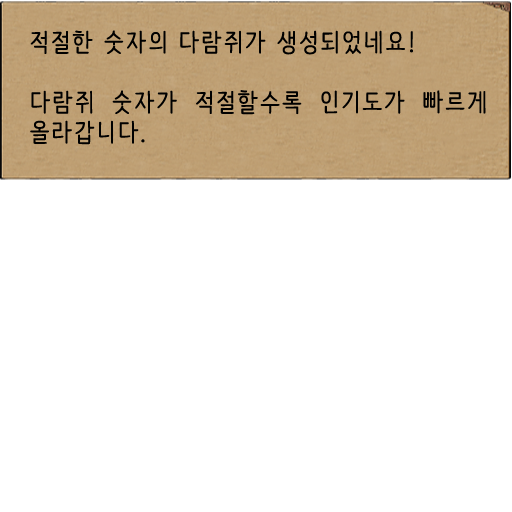
<style>
.page{position:relative;width:512px;height:512px;background:#ffffff}
.page>*{position:absolute;margin:0}
.t1{font:25px "NanumBarunpen";letter-spacing:0.075em;color:#000000;font-weight:bold}
</style>
<div class="page">
<p class="t1" style="left:30px;top:30px;width:456px;height:115px;text-align:justify">적절한 숫자의 다람쥐가 생성되었네요!<br><br>다람쥐 숫자가 적절할수록 인기도가 빠르게 올라갑니다.</p>
</div>
